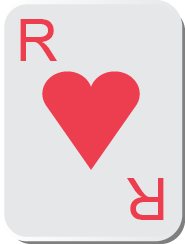
<style>
.page{position:relative;width:185px;height:244px;background:#e6e7e8}
.page>*{position:absolute;margin:0}
.t1{font:58.3px "ArialMT";letter-spacing:-0.16em;color:#ed3e50}
</style>
<div class="page">
<p class="t1" style="left:20px;top:19px;width:37px;height:42px">R</p>
<p class="t1" style="left:127px;top:178px;width:37px;height:42px;rotate:180deg">R</p>
</div>
